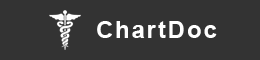
<style>
.page{position:relative;width:260px;height:60px;background:#333333}
.page>*{position:absolute;margin:0}
.t1{font:24px "Arial-BoldMT";letter-spacing:0.075em;color:#ffffff}
</style>
<div class="page">
<p class="t1" style="left:97px;top:21px;width:120px;height:17px">ChartDoc</p>
</div>
